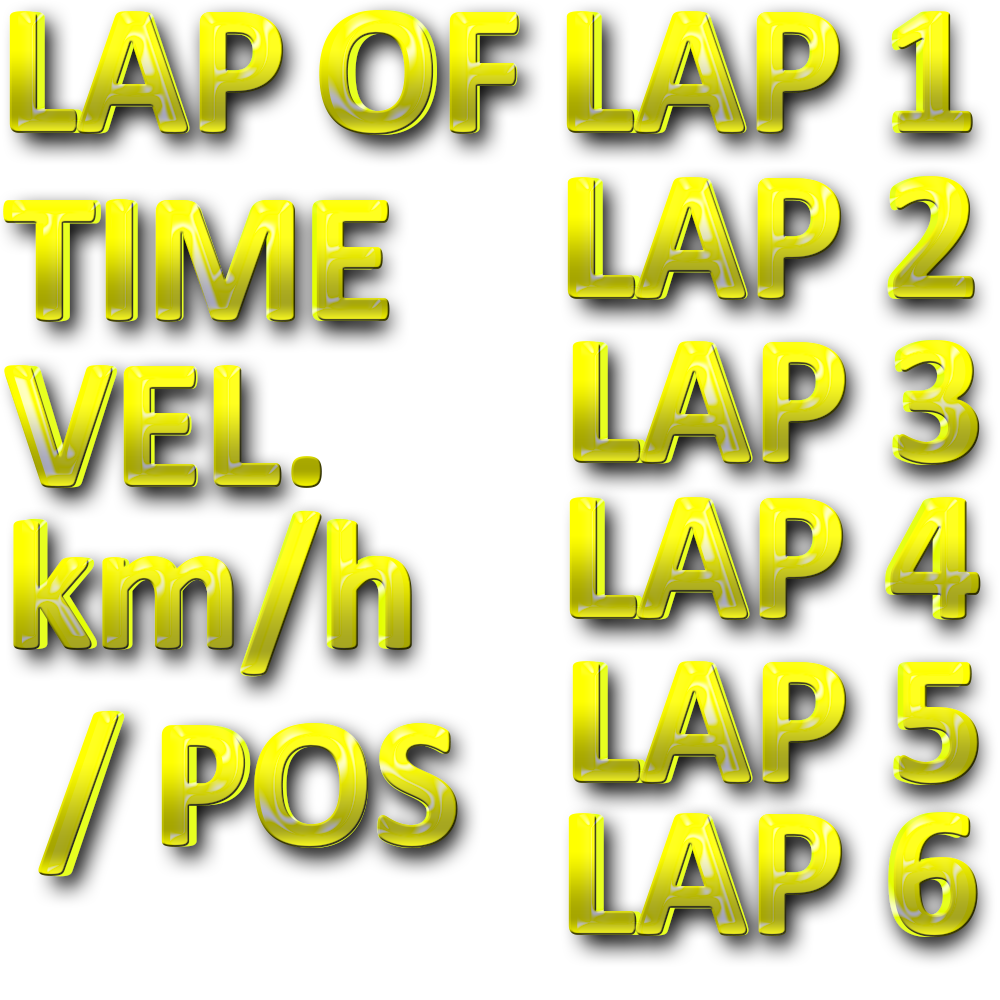
<style>
.page{position:relative;width:1000px;height:1000px;background:#ffffff}
.page>*{position:absolute;margin:0}
.t1{font:185.3px "Calibri-Bold";letter-spacing:-0.025em;font-weight:bold}
.t2{font:185.3px "Calibri-Bold";letter-spacing:-0.025em;font-weight:bold;scale:0.95 1}
</style>
<div class="page">
<p class="t1" style="left:9px;top:11px;width:275px;height:123px">LAP</p>
<p class="t2" style="left:18px;top:11px;width:263px;height:123px">LAP</p>
<p class="t1" style="left:319px;top:10px;width:200px;height:125px">OF</p>
<p class="t2" style="left:328px;top:10px;width:192px;height:125px">OF</p>
<p class="t1" style="left:566px;top:11px;width:407px;height:123px">LAP 1</p>
<p class="t2" style="left:575px;top:11px;width:389px;height:123px">LAP 1</p>
<p class="t1" style="left:567px;top:176px;width:408px;height:124px">LAP 2</p>
<p class="t2" style="left:576px;top:176px;width:390px;height:124px">LAP 2</p>
<p class="t1" style="left:3px;top:199px;width:387px;height:123px">TIME</p>
<p class="t2" style="left:12px;top:199px;width:370px;height:123px">TIME</p>
<p class="t1" style="left:572px;top:340px;width:408px;height:125px">LAP 3</p>
<p class="t2" style="left:581px;top:340px;width:390px;height:125px">LAP 3</p>
<p class="t1" style="left:4px;top:365px;width:318px;height:123px">VEL.</p>
<p class="t2" style="left:13px;top:365px;width:267px;height:123px">VEL</p>
<p class="t1" style="left:569px;top:497px;width:412px;height:123px">LAP 4</p>
<p class="t2" style="left:578px;top:497px;width:394px;height:123px">LAP 4</p>
<p class="t2" style="left:21px;top:510px;width:383px;height:167px">km/h</p>
<p class="t1" style="left:13px;top:511px;width:399px;height:165px">km/h</p>
<p class="t1" style="left:572px;top:661px;width:407px;height:124px">LAP 5</p>
<p class="t2" style="left:581px;top:661px;width:389px;height:124px">LAP 5</p>
<p class="t1" style="left:38px;top:711px;width:81px;height:165px">/</p>
<p class="t2" style="left:47px;top:710px;width:78px;height:167px">/</p>
<p class="t1" style="left:161px;top:723px;width:297px;height:125px">POS</p>
<p class="t2" style="left:170px;top:723px;width:284px;height:125px">POS</p>
<p class="t1" style="left:568px;top:812px;width:410px;height:125px">LAP 6</p>
<p class="t2" style="left:577px;top:812px;width:392px;height:125px">LAP 6</p>
</div>
